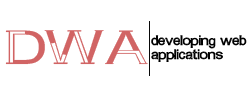
<style>
.page{position:relative;width:250px;height:100px;background:#ffffff}
.page>*{position:absolute;margin:0}
.t1{font:39.7px "ABitEmpty";color:#d16464;scale:1.31 1}
.t2{font:11.2px "ABitEmpty";color:#000000;scale:1.03 1}
</style>
<div class="page">
<p class="t1" style="left:5px;top:30px;width:143px;height:35px">DWA</p>
<p class="t2" style="left:151px;top:35px;width:96px;height:27px">developing web<br>applications</p>
</div>
